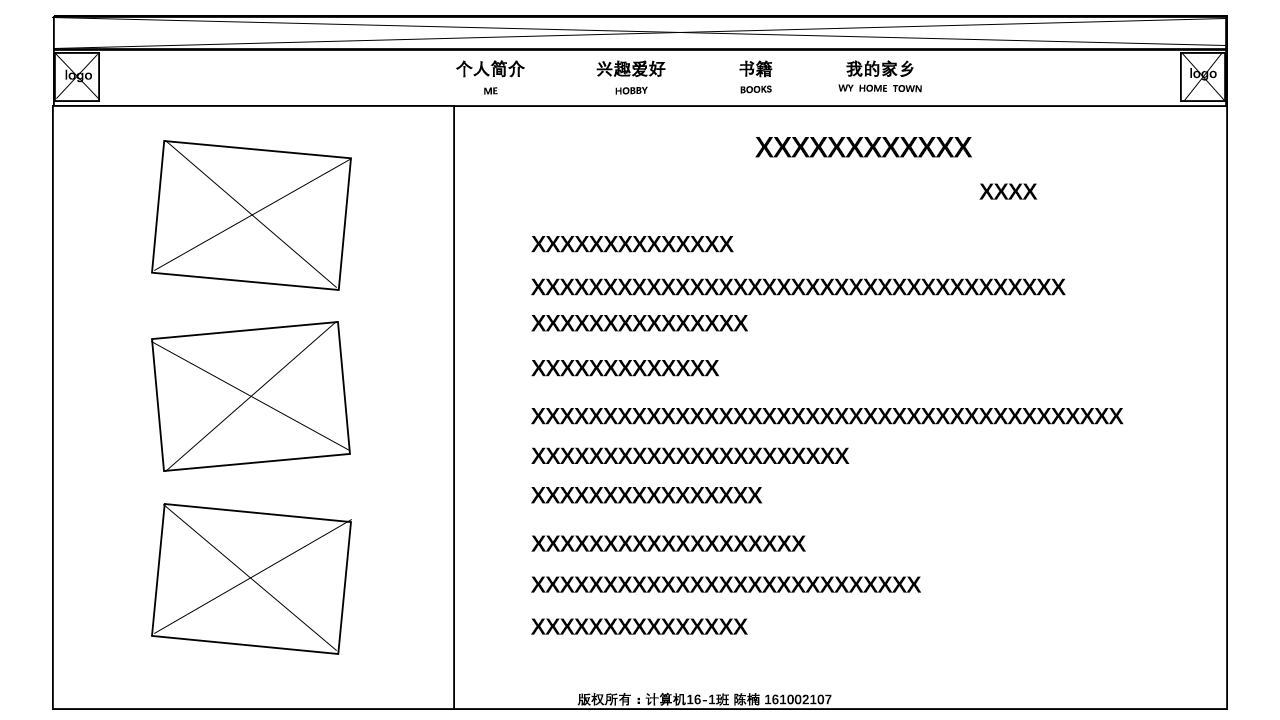
<style>
.page{position:relative;width:1280px;height:720px;background:#ffffff}
.page>*{position:absolute;margin:0}
.t1{font:13.6px "DengXian-Bold";color:#000000}
.t2{font:29.2px "DengXian-Bold";color:#000000}
.t3{font:23.3px "DengXian-Bold";color:#000000}
</style>
<div class="page">
<p class="t1" style="left:65px;top:69px;width:27px;height:14px">logo</p>
<p class="t1" style="left:1190px;top:68px;width:27px;height:13px">logo</p>
<p class="t2" style="left:755px;top:137px;width:218px;height:21px">XXXXXXXXXXXX</p>
<p class="t3" style="left:979px;top:183px;width:59px;height:17px">XXXX</p>
<p class="t3" style="left:531px;top:236px;width:203px;height:17px">XXXXXXXXXXXXXX</p>
<p class="t3" style="left:531px;top:278px;width:535px;height:18px">XXXXXXXXXXXXXXXXXXXXXXXXXXXXXXXXXXXXXXXX<br>XXXXXXXXXXXXXXXXXXXXXXXXXXXXXXXXXXXXXXXXXXXX</p>
<p class="t3" style="left:531px;top:315px;width:218px;height:17px">XXXXXXXXXXXXXXX</p>
<p class="t3" style="left:531px;top:360px;width:189px;height:17px">XXXXXXXXXXXXX</p>
<p class="t3" style="left:531px;top:408px;width:593px;height:17px">XXXXXXXXXXXXXXXXXXXXXXXXXXXXXXXXXXXXXXXXX</p>
<p class="t3" style="left:531px;top:447px;width:319px;height:17px">XXXXXXXXXXXXXXXXXXXXXX</p>
<p class="t3" style="left:531px;top:487px;width:232px;height:17px">XXXXXXXXXXXXXXXX</p>
<p class="t3" style="left:531px;top:535px;width:275px;height:17px">XXXXXXXXXXXXXXXXXXX</p>
<p class="t3" style="left:531px;top:576px;width:391px;height:17px">XXXXXXXXXXXXXXXXXXXXXXXXXXX</p>
<p class="t3" style="left:531px;top:618px;width:217px;height:17px">XXXXXXXXXXXXXXX</p>
<p class="t1" style="left:577px;top:692px;width:255px;height:14px">版权所有：计算机16-1班 陈楠 161002107</p>
</div>
